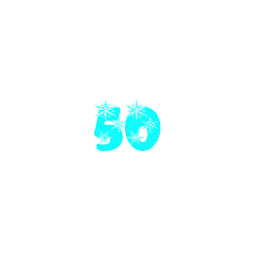
<style>
.page{position:relative;width:255px;height:255px;background:#ffffff}
.page>*{position:absolute;margin:0}
.t1{font:69.5px "winterflakes";color:#0ffcff;scale:1.12 1}
</style>
<div class="page">
<p class="t1" style="left:94px;top:100px;width:67px;height:51px">50</p>
</div>
